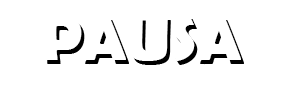
<style>
.page{position:relative;width:287px;height:87px;background:#ffffff}
.page>*{position:absolute;margin:0}
.t1{font:64px "BerlinSansFBDemi-Bold";color:#ffffff}
</style>
<div class="page">
<p class="t1" style="left:43px;top:15px;width:198px;height:46px">PAUSA</p>
<p class="t1" style="left:46px;top:19px;width:198px;height:46px">PAUSA</p>
</div>
